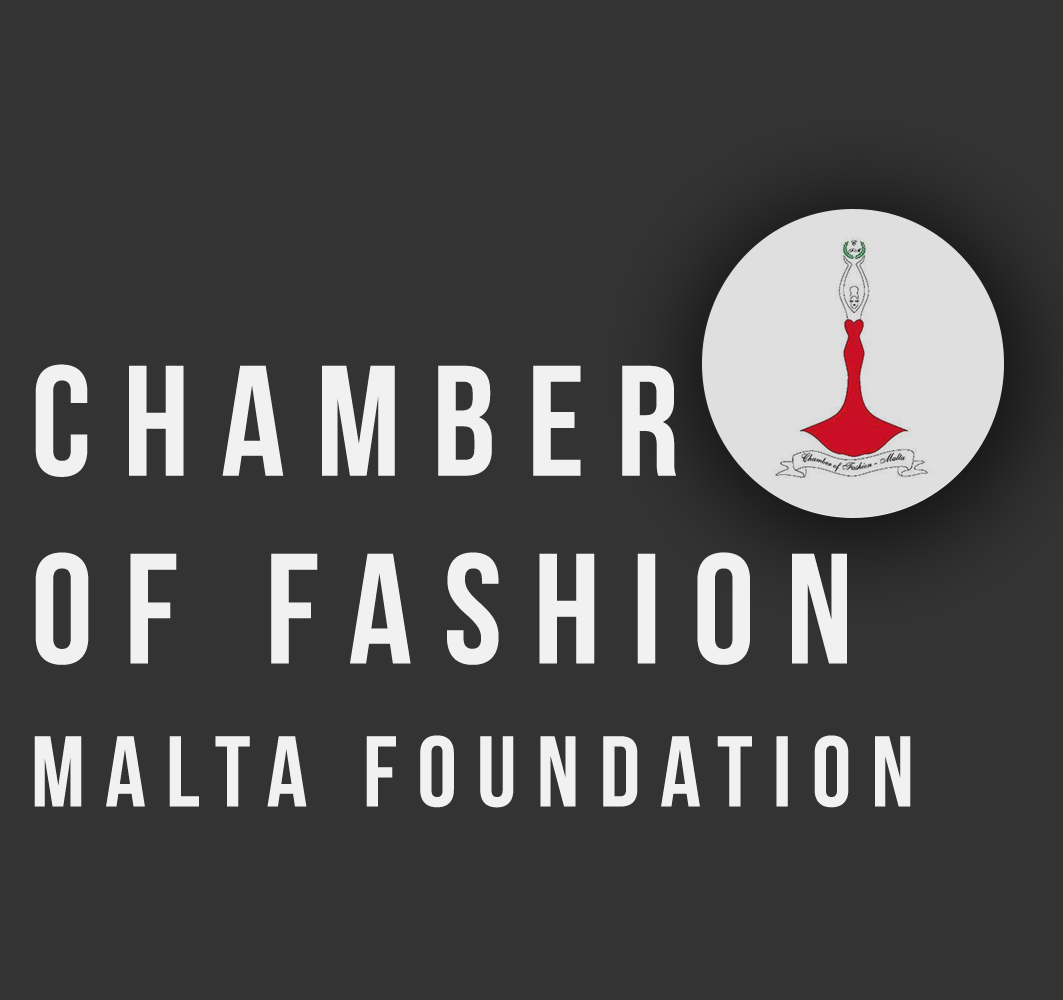
<style>
.page{position:relative;width:1063px;height:1000px;background:#333333}
.page>*{position:absolute;margin:0}
.t1{font:156.6px "BebasNeue";letter-spacing:0.2em;color:#f1f1f1}
.t2{font:100px "BebasNeue";letter-spacing:0.2em;color:#f1f1f1}
</style>
<div class="page">
<p class="t1" style="left:34px;top:364px;width:877px;height:444px;text-align:right">Chamber <br>of Fashion <span class="t2">Malta Foundation</span></p>
</div>
